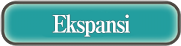
<style>
.page{position:relative;width:181px;height:46px;background:#239e9f}
.page>*{position:absolute;margin:0}
.t1{font:24px "RyuminPro-ExBold";letter-spacing:-0.08em;color:#ffffff;scale:0.9 1}
</style>
<div class="page">
<p class="t1" style="left:52px;top:14px;width:78px;height:23px">Ekspansi</p>
</div>
